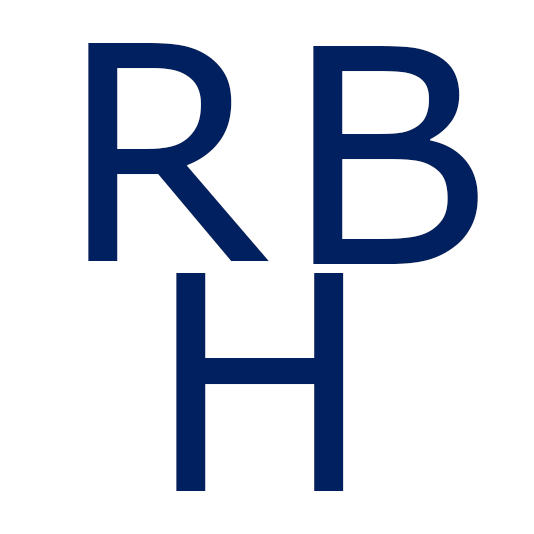
<style>
.page{position:relative;width:534px;height:534px;background:#ffffff}
.page>*{position:absolute;margin:0}
.t1{font:300px "Verdana";color:#002060}
</style>
<div class="page">
<p class="t1" style="left:88px;top:43px;width:181px;height:218px">R</p>
<p class="t1" style="left:313px;top:46px;width:165px;height:218px">B</p>
<p class="t1" style="left:176px;top:273px;width:168px;height:218px">H</p>
</div>
